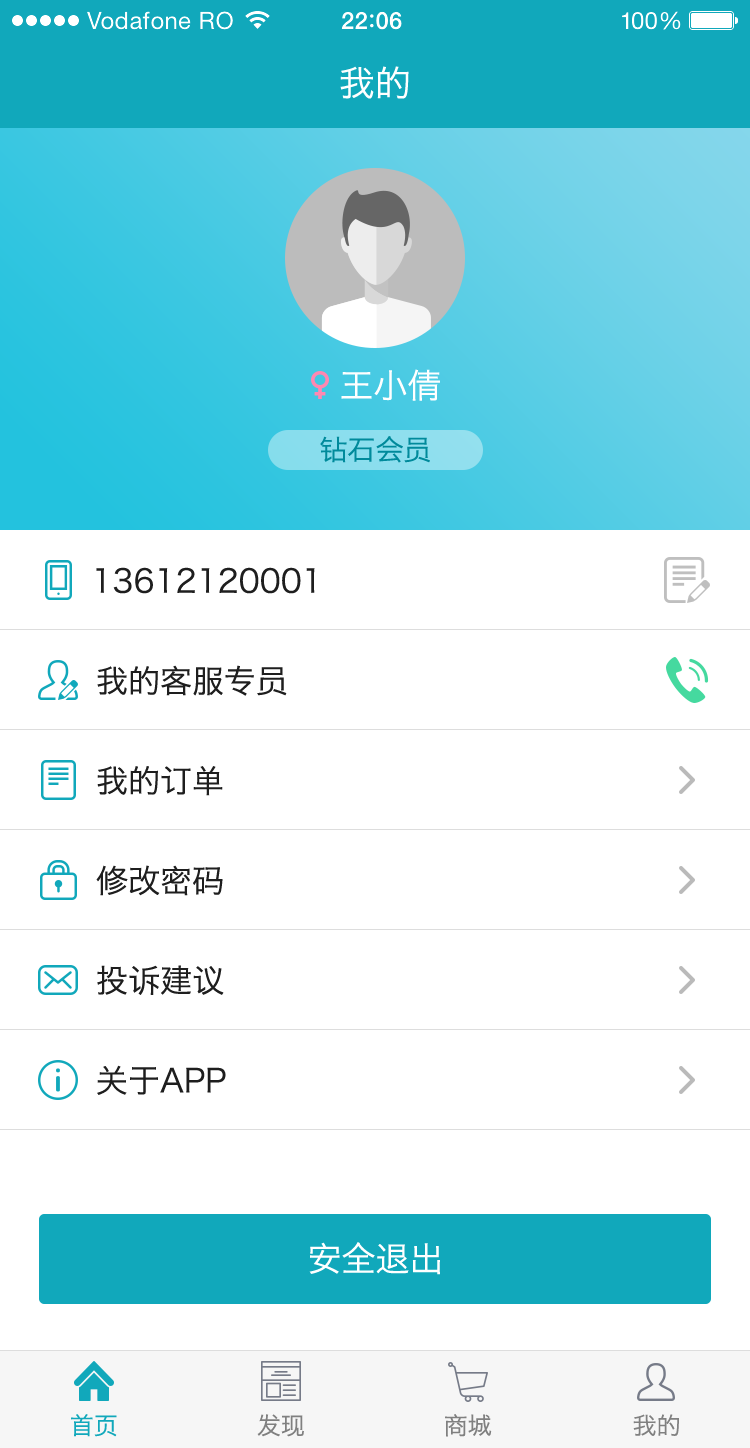
<style>
.page{position:relative;width:750px;height:1448px;background:#ffffff}
.page>*{position:absolute;margin:0}
.t1{font:36px "HiraginoSansGB-W3";color:#ffffff}
.t2{font:34px "HiraginoSansGB-W3";color:#ffffff}
.t3{font:28px "HiraginoSansGB-W3";color:#008a9b}
.t4{font:32px "HiraginoSansGB-W3";color:#1e1e1e}
.t5{font:24px "HiraginoSansGB-W3";color:#11a8bb}
.t6{font:24px "HiraginoSansGB-W3";color:#808080}
</style>
<div class="page">
<p class="t1" style="left:340px;top:66px;width:69px;height:33px">我的</p>
<p class="t2" style="left:341px;top:369px;width:99px;height:32px">王小倩</p>
<p class="t3" style="left:320px;top:436px;width:110px;height:27px">钻石会员</p>
<p class="t4" style="left:96px;top:567px;width:219px;height:27px">13612120001</p>
<p class="t4" style="left:97px;top:665px;width:190px;height:31px">我的客服专员</p>
<p class="t4" style="left:97px;top:766px;width:126px;height:30px">我的订单</p>
<p class="t4" style="left:96px;top:865px;width:127px;height:31px">修改密码</p>
<p class="t4" style="left:97px;top:965px;width:127px;height:30px">投诉建议</p>
<p class="t4" style="left:97px;top:1065px;width:129px;height:30px">关于APP</p>
<p class="t2" style="left:309px;top:1242px;width:131px;height:33px">安全退出</p>
<p class="t5" style="left:71px;top:1414px;width:46px;height:23px">首页</p>
<p class="t6" style="left:257px;top:1414px;width:47px;height:23px">发现</p>
<p class="t6" style="left:445px;top:1414px;width:47px;height:23px">商城</p>
<p class="t6" style="left:633px;top:1414px;width:46px;height:22px">我的</p>
</div>
